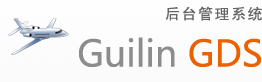
<style>
.page{position:relative;width:262px;height:82px}
.page>*{position:absolute;margin:0}
.t1{font:36px "MicrosoftYaHei";color:#8c8c8c}
.t2{font:36px "MicrosoftYaHei";color:#eb6100}
</style>
<div class="page">
<p class="t1" style="left:79px;top:37px;width:182px;height:30px">Guilin <span class="t2">GDS</span></p>
</div>
